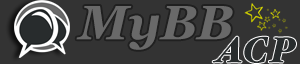
<style>
.page{position:relative;width:300px;height:64px;background:#333333}
.page>*{position:absolute;margin:0}
.t1{font:48px "Georgia-BoldItalic";color:#696969}
</style>
<div class="page">
<p class="t1" style="left:76px;top:6px;width:157px;height:44px">MyBB</p>
</div>
